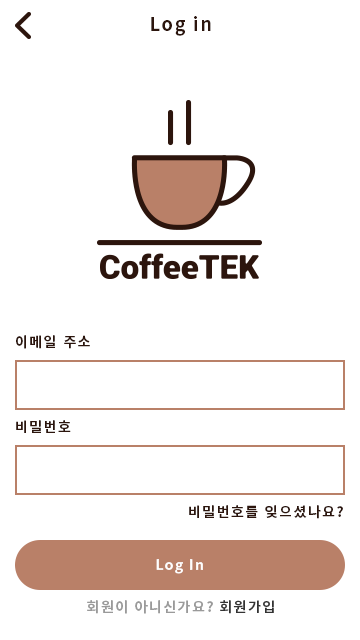
<style>
.page{position:relative;width:360px;height:640px;background:#ffffff}
.page>*{position:absolute;margin:0}
.t1{font:18px "NotoSansKR-Bold";letter-spacing:0.1em;color:#2c150d}
.t2{font:14px "NotoSansKR-Bold";letter-spacing:0.1em;color:#2c150d}
.t3{font:14px "NotoSansKR-Bold";letter-spacing:0.1em;color:#fefefe}
.t4{font:14px "NotoSansKR-Bold";letter-spacing:0.1em;color:#9a9a9a}
.t5{font:14px "NotoSansKR-Bold";letter-spacing:0.1em;color:#333333}
</style>
<div class="page">
<p class="t1" style="left:151px;top:16px;width:60px;height:20px">Log in</p>
<p class="t2" style="left:16px;top:335px;width:74px;height:14px">이메일 주소</p>
<p class="t2" style="left:16px;top:420px;width:55px;height:13px">비밀번호</p>
<p class="t2" style="left:189px;top:505px;width:154px;height:14px">비밀번호를 잊으셨나요?</p>
<p class="t3" style="left:156px;top:559px;width:47px;height:15px">Log In</p>
<p class="t4" style="left:87px;top:600px;width:187px;height:14px">회원이 아니신가요?<span class="t5"> 회원가입</span></p>
</div>
